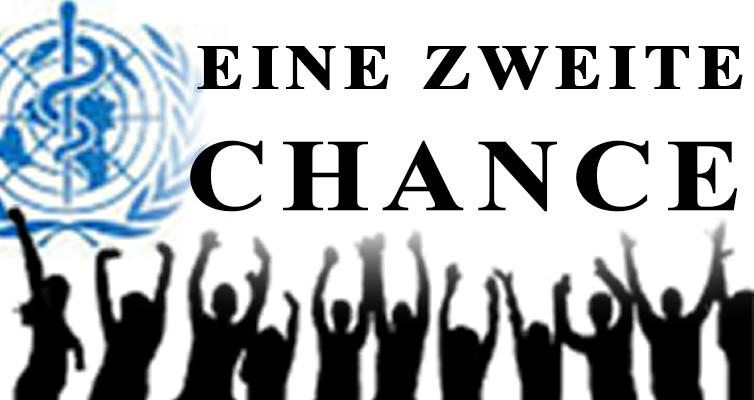
<style>
.page{position:relative;width:754px;height:400px;background:#ffffff}
.page>*{position:absolute;margin:0}
.t1{font:62.5px "TimesNewRomanPS-BoldMT";letter-spacing:0.08em;color:#000000;font-weight:bold;scale:1.12 1}
.t2{font:102.1px "TimesNewRomanPS-BoldMT";letter-spacing:0.08em;color:#000000;font-weight:bold;scale:1.12 1}
</style>
<div class="page">
<p class="t1" style="left:190px;top:46px;width:553px;height:166px;text-align:right">EINE ZWEITE<br><span class="t2">CHANCE</span></p>
</div>
